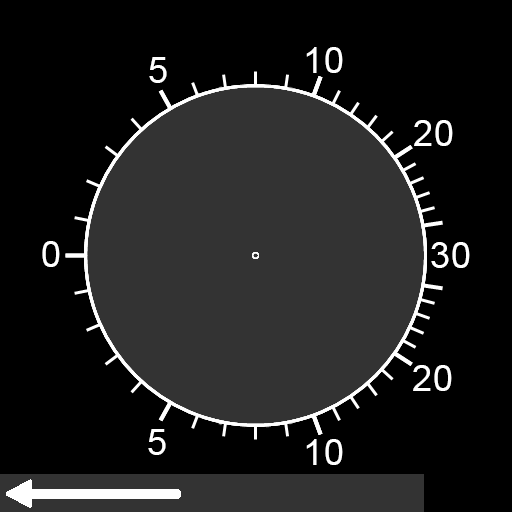
<style>
.page{position:relative;width:512px;height:512px;background:#000000}
.page>*{position:absolute;margin:0}
.t1{font:36px "ArialMT";letter-spacing:0.025em;color:#ffffff}
</style>
<div class="page">
<p class="t1" style="left:306px;top:47px;width:37px;height:26px">10</p>
<p class="t1" style="left:149px;top:57px;width:18px;height:26px">5</p>
<p class="t1" style="left:414px;top:120px;width:39px;height:26px">20</p>
<p class="t1" style="left:42px;top:241px;width:18px;height:26px">0</p>
<p class="t1" style="left:431px;top:242px;width:39px;height:26px">30</p>
<p class="t1" style="left:413px;top:365px;width:39px;height:26px">20</p>
<p class="t1" style="left:148px;top:429px;width:18px;height:26px">5</p>
<p class="t1" style="left:306px;top:439px;width:37px;height:26px">10</p>
</div>
